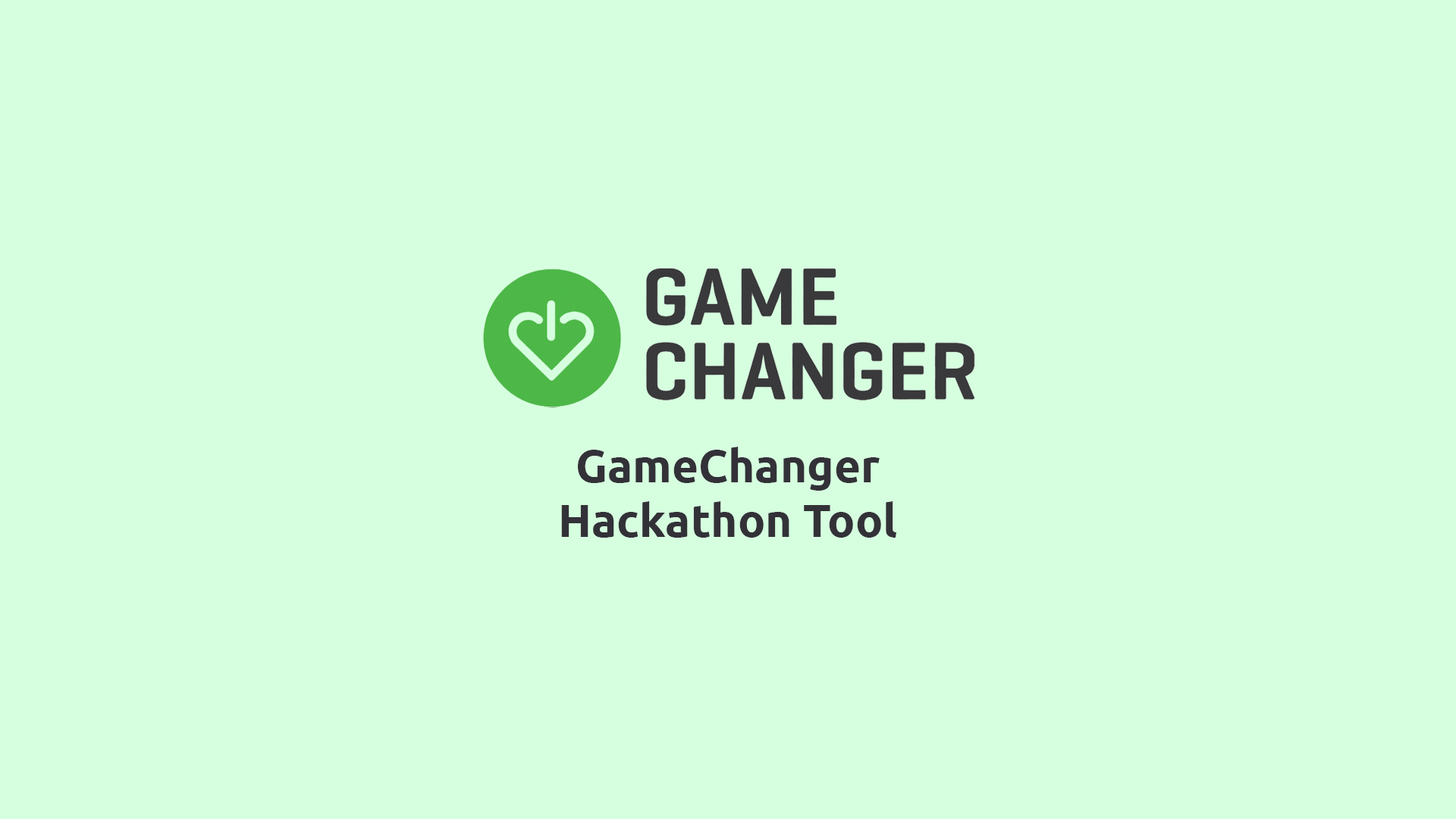
<style>
.page{position:relative;width:1456px;height:819px;background:#d6ffdf}
.page>*{position:absolute;margin:0}
.t1{font:45.5px "Ubuntu-Bold";color:#333138}
</style>
<div class="page">
<p class="t1" style="left:561px;top:447px;width:335px;height:91px;text-align:center">GameChanger<br>Hackathon Tool</p>
</div>
